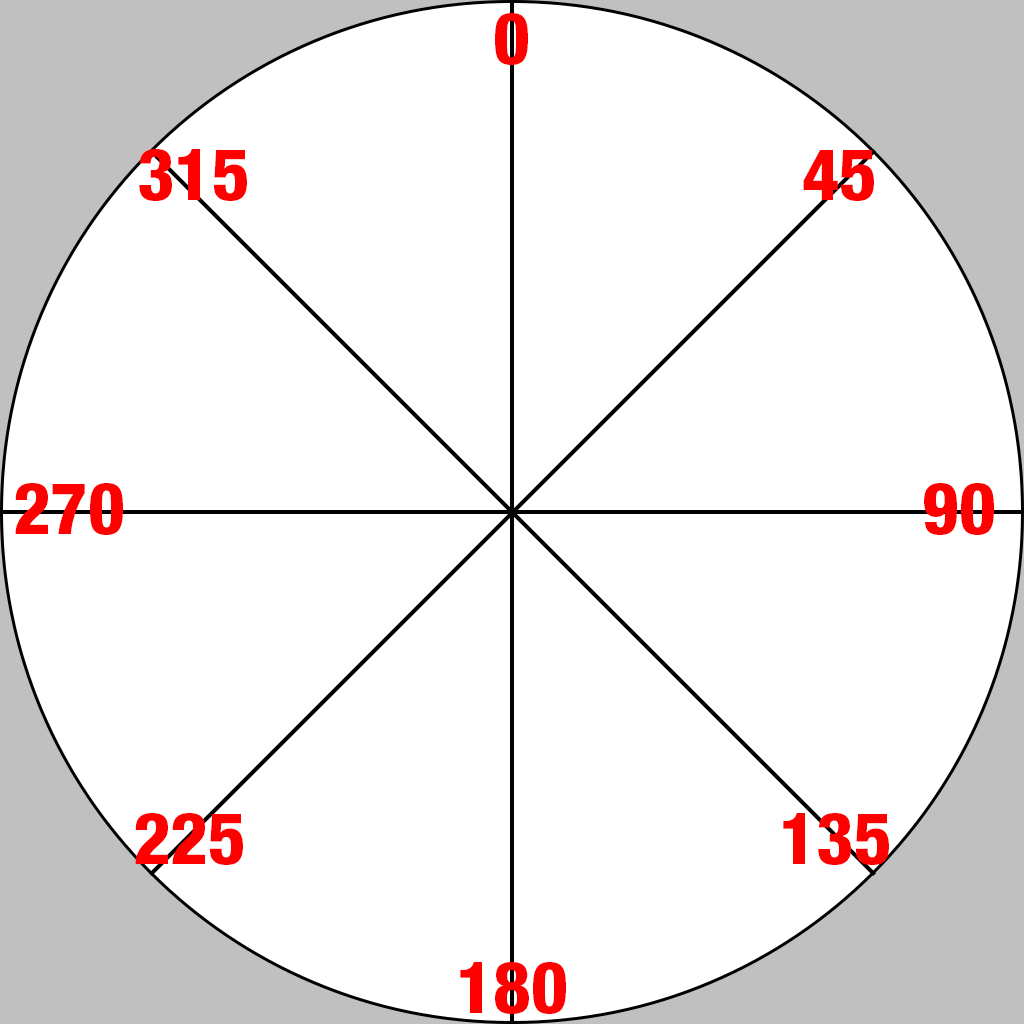
<style>
.page{position:relative;width:1024px;height:1024px;background:#ffffff}
.page>*{position:absolute;margin:0}
.t1{font:72px "HelveticaNeueLTStd-HvCn";color:#ff0000}
</style>
<div class="page">
<p class="t1" style="left:495px;top:13px;width:33px;height:52px">0</p>
<p class="t1" style="left:139px;top:149px;width:108px;height:52px">315</p>
<p class="t1" style="left:803px;top:150px;width:71px;height:51px">45</p>
<p class="t1" style="left:15px;top:483px;width:108px;height:52px">270</p>
<p class="t1" style="left:924px;top:483px;width:70px;height:52px">90</p>
<p class="t1" style="left:135px;top:813px;width:108px;height:52px">225</p>
<p class="t1" style="left:783px;top:813px;width:106px;height:52px">135</p>
<p class="t1" style="left:460px;top:962px;width:106px;height:52px">180</p>
</div>
